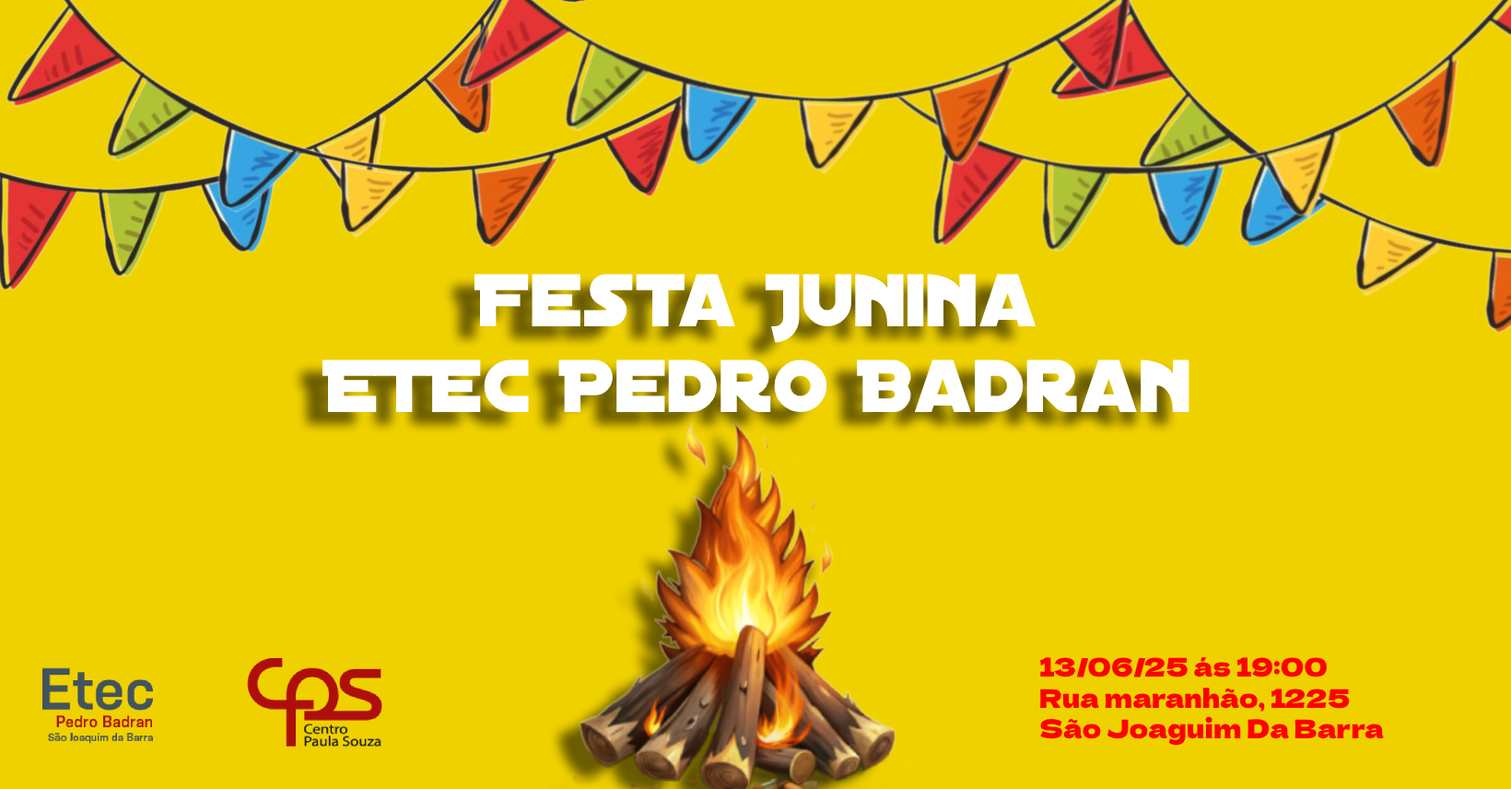
<style>
.page{position:relative;width:1511px;height:789px;background:#f0d100}
.page>*{position:absolute;margin:0}
.t1{font:80.2px "DistantGalaxy";color:#ffffff}
.t2{font:25.8px "DelaGothicOne-Regular";color:#ff0000}
</style>
<div class="page">
<p class="t1" style="left:474px;top:274px;width:563px;height:69px">Festa Junina</p>
<p class="t1" style="left:322px;top:359px;width:868px;height:54px">ETEC Pedro Badran</p>
<p class="t2" style="left:1041px;top:657px;width:343px;height:89px">13/06/25 ás 19:00<br>Rua maranhão, 1225 <br>São Joaguim Da Barra</p>
</div>
